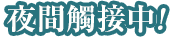
<style>
.page{position:relative;width:171px;height:37px;background:#28737e}
.page>*{position:absolute;margin:0}
.t1{font:30px "RyuminPr6N-ExBold";color:#fffffd}
.t2{font:30px "RyuminPr6N-ExBold";color:#fffffd;font-style:italic}
</style>
<div class="page">
<p class="t1" style="left:7px;top:4px;width:159px;height:29px">夜間觸接中<span class="t2">!</span></p>
</div>
